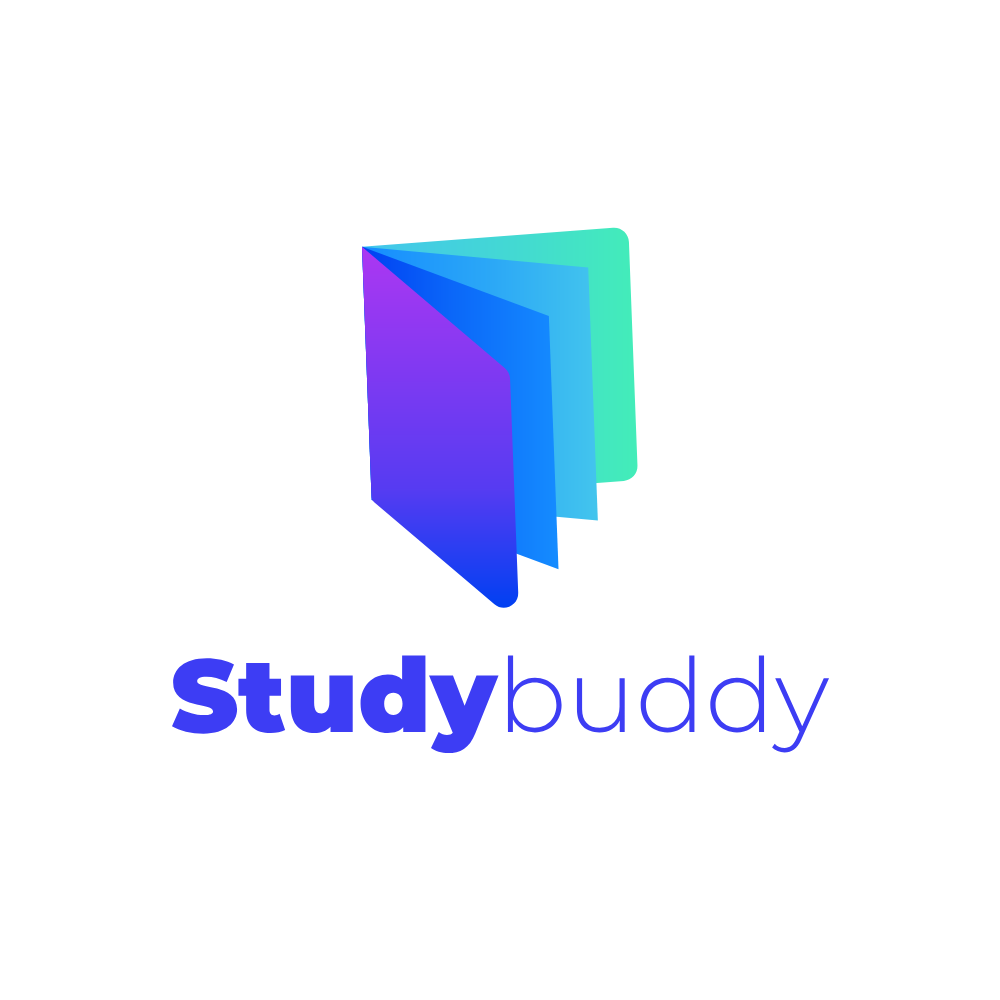
<style>
.page{position:relative;width:1000px;height:1000px;background:#ffffff}
.page>*{position:absolute;margin:0}
.t1{font:103.1px "Montserrat-Black";color:#3d3df4}
.t2{font:103.1px "Montserrat-Light";color:#3d3df4}
</style>
<div class="page">
<p class="t1" style="left:172px;top:655px;width:658px;height:99px">Study<span class="t2">buddy</span></p>
</div>
